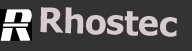
<style>
.page{position:relative;width:192px;height:51px;background:#333333}
.page>*{position:absolute;margin:0}
.t1{font:33.9px "Tahoma-Bold";color:#d8cad1}
</style>
<div class="page">
<p class="t1" style="left:40px;top:7px;width:137px;height:30px;rotate:2deg">Rhostec</p>
</div>
